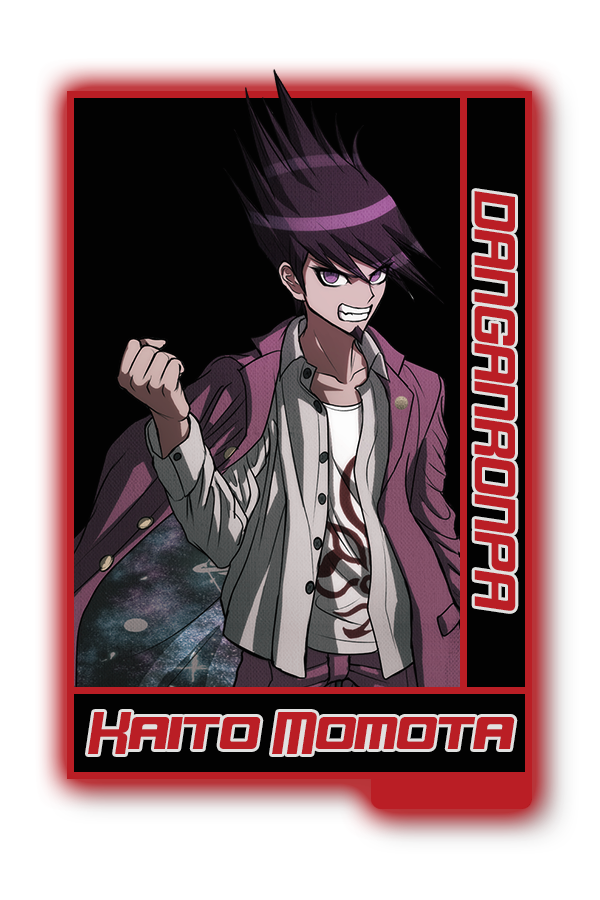
<style>
.page{position:relative;width:600px;height:900px;background:#020202}
.page>*{position:absolute;margin:0}
.t1{font:48.8px "DorBlue";color:#bb2c2e}
.t2{font:50.5px "DorBlue";color:#bb2c2e}
</style>
<div class="page">
<p class="t1" style="left:474px;top:191px;width:42px;height:420px;rotate:90deg">DANGANRONPA</p>
<p class="t2" style="left:88px;top:712px;width:427px;height:42px">Kaito Momota</p>
</div>
